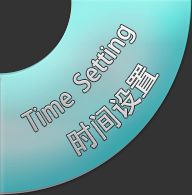
<style>
.page{position:relative;width:192px;height:195px;background:#333333}
.page>*{position:absolute;margin:0}
.t1{font:24.9px "AdobeHeitiStd-Regular";scale:0.91 1}
.t2{font:28.9px "AdobeHeitiStd-Regular";scale:0.91 1}
</style>
<div class="page">
<p class="t1" style="left:21px;top:25px;width:115px;height:107px;rotate:-45deg">Time  Setting</p>
<p class="t2" style="left:66px;top:64px;width:93px;height:92px;rotate:-45deg">时间设置</p>
</div>
